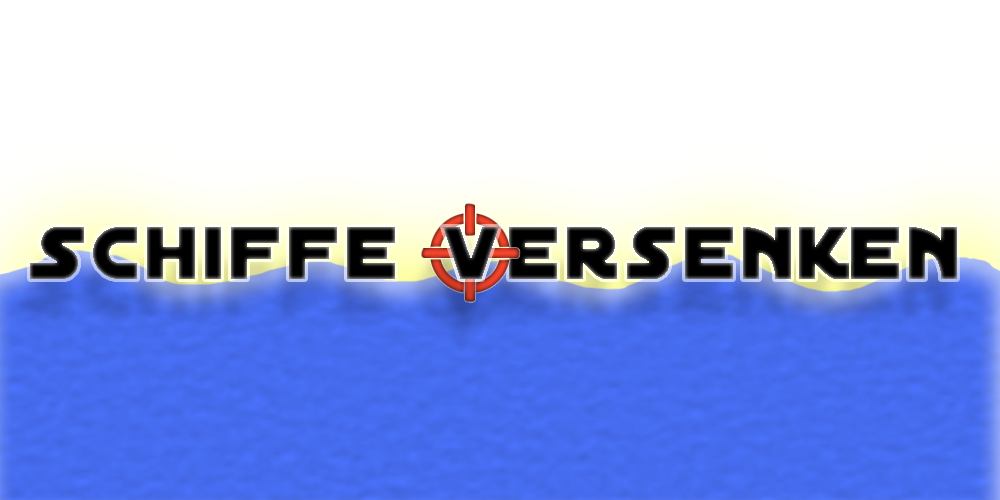
<style>
.page{position:relative;width:1000px;height:500px;background:#ffffff}
.page>*{position:absolute;margin:0}
.t1{font:80px "DistantGalaxy";letter-spacing:0.075em;color:#000000}
</style>
<div class="page">
<p class="t1" style="left:30px;top:227px;width:927px;height:52px">Schiffe versenken</p>
<p class="t1" style="left:443px;top:227px;width:56px;height:52px">v</p>
</div>
